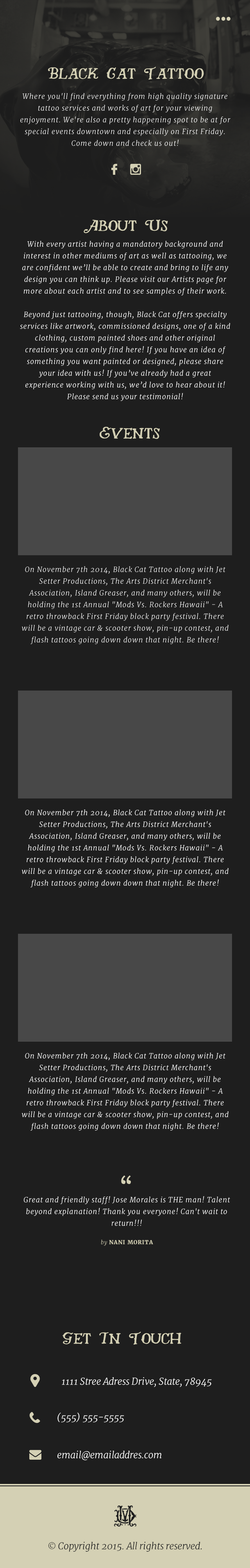
<style>
.page{position:relative;width:250px;height:1568px;background:#1e1e1e}
.page>*{position:absolute;margin:0}
.t1{font:19.6px "NATIVE";color:#d4d0b4}
.t2{font:7px/11.7px "Merriweather-LightItalic";letter-spacing:0.075em;color:#ffffff}
.t3{font:31.3px "NoticiaText-Regular";color:#d4d0b4}
.t4{font:5.5px "Merriweather-Bold";letter-spacing:0.075em;color:#d4d0b4;text-transform:uppercase}
.t5{font:5.5px "Merriweather-LightItalic";letter-spacing:0.075em;color:#d4d0b4}
.t6{font:9.4px "Merriweather-LightItalic";color:#ffffff}
.t7{font:9.4px "Merriweather-LightItalic";color:#1e1e1e}
</style>
<div class="page">
<p class="t1" style="left:48px;top:66px;width:156px;height:14px">Black Cat Tattoo</p>
<p class="t2" style="left:20px;top:93px;width:211px;height:53px;text-align:center">Where you'll find everything from high quality signature tattoo services and works of art for your viewing enjoyment. We're also a pretty happening spot to be at for special events downtown and especially on First Friday. Come down and check us out!</p>
<p class="t1" style="left:84px;top:219px;width:84px;height:14px">About Us</p>
<p class="t2" style="left:20px;top:241px;width:210px;height:160px;text-align:center">With every artist having a mandatory background and interest in other mediums of art as well as tattooing, we are confident we’ll be able to create and bring to life any design you can think up. Please visit our Artists page for more about each artist and to see samples of their work.<br> <br>Beyond just tattooing, though, Black Cat offers specialty services like artwork, commissioned designs, one of a kind clothing, custom painted shoes and other original creations you can only find here! If you have an idea of something you want painted or designed, please share your idea with us! If you’ve already had a great experience working with us, we’d love to hear about it! Please send us your testimonial!</p>
<p class="t1" style="left:100px;top:427px;width:60px;height:12px">Events</p>
<p class="t2" style="left:22px;top:566px;width:207px;height:78px;text-align:center">On November 7th 2014, Black Cat Tattoo along with Jet Setter Productions, The Arts District Merchant's Association, Island Greaser, and many others, will be holding the 1st Annual "Mods Vs. Rockers Hawaii" - A retro throwback First Friday block party festival. There will be a vintage car &amp; scooter show, pin-up contest, and flash tattoos going down down that night. Be there!</p>
<p class="t2" style="left:22px;top:809px;width:207px;height:79px;text-align:center">On November 7th 2014, Black Cat Tattoo along with Jet Setter Productions, The Arts District Merchant's Association, Island Greaser, and many others, will be holding the 1st Annual "Mods Vs. Rockers Hawaii" - A retro throwback First Friday block party festival. There will be a vintage car &amp; scooter show, pin-up contest, and flash tattoos going down down that night. Be there!</p>
<p class="t2" style="left:22px;top:1053px;width:207px;height:78px;text-align:center">On November 7th 2014, Black Cat Tattoo along with Jet Setter Productions, The Arts District Merchant's Association, Island Greaser, and many others, will be holding the 1st Annual "Mods Vs. Rockers Hawaii" - A retro throwback First Friday block party festival. There will be a vintage car &amp; scooter show, pin-up contest, and flash tattoos going down down that night. Be there!</p>
<p class="t3" style="left:121px;top:1175px;width:10px;height:9px">“</p>
<p class="t2" style="left:24px;top:1196px;width:206px;height:30px;text-align:center">Great and friendly staff! Jose Morales is THE man! Talent beyond explanation! Thank you everyone! Can't wait to return!!!</p>
<p class="t4" style="left:101px;top:1240px;width:52px;height:6px"><span class="t5">by </span>Nani Morita</p>
<p class="t1" style="left:63px;top:1331px;width:118px;height:14px">Get In Touch</p>
<p class="t6" style="left:62px;top:1377px;width:150px;height:10px">1111 Stree Adress Drive, State, 78945</p>
<p class="t6" style="left:57px;top:1412px;width:67px;height:11px">(555) 555-5555</p>
<p class="t6" style="left:57px;top:1451px;width:105px;height:9px">email@emailaddres.com</p>
<p class="t7" style="left:48px;top:1542px;width:154px;height:10px">© Copyright 2015. All rights reserved.</p>
</div>
